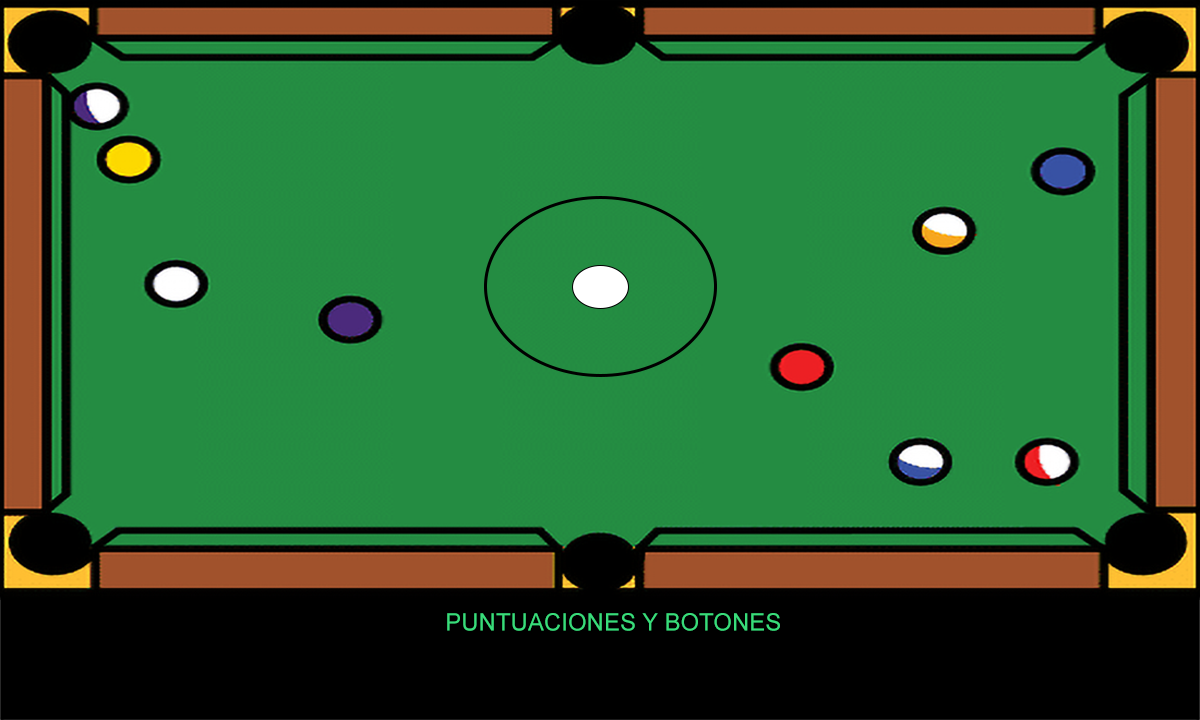
<style>
.page{position:relative;width:1200px;height:720px;background:#248c42}
.page>*{position:absolute;margin:0}
.t1{font:24px "ArialMT";color:#39dc7a}
</style>
<div class="page">
<p class="t1" style="left:447px;top:613px;width:333px;height:18px">PUNTUACIONES Y BOTONES</p>
</div>
